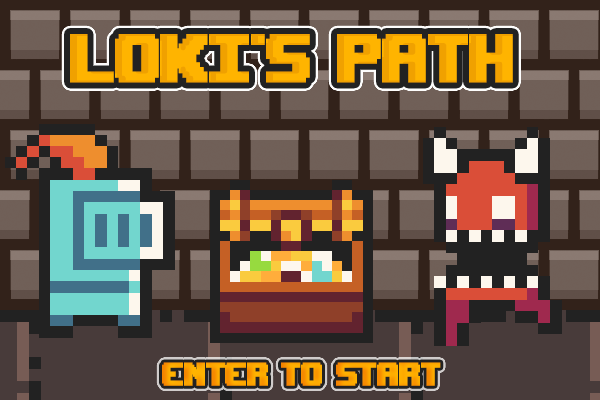
<style>
.page{position:relative;width:600px;height:400px}
.page>*{position:absolute;margin:0}
.t1{font:100px "Upheaval -BRK-";color:#ffb400;font-weight:bold;scale:0.8 1}
.t2{font:48px "Upheaval -BRK-";color:#ffb400;font-weight:bold;scale:0.8 1}
</style>
<div class="page">
<p class="t1" style="left:70px;top:34px;width:443px;height:49px">LOKI'S PATH</p>
<p class="t2" style="left:162px;top:362px;width:279px;height:24px">enter to start</p>
</div>
